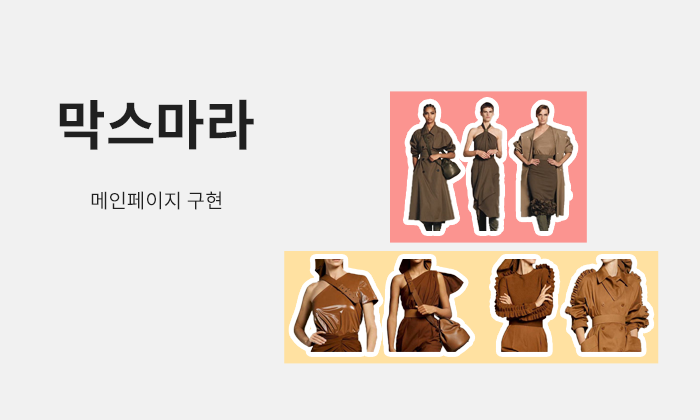
<style>
.page{position:relative;width:700px;height:420px;background:#f1f1f1}
.page>*{position:absolute;margin:0}
.t1{font:54px "NotoSansKR-Bold";color:#202020}
.t2{font:20px "NotoSansKR-Regular";color:#202020}
</style>
<div class="page">
<p class="t1" style="left:59px;top:99px;width:195px;height:51px">막스마라</p>
<p class="t2" style="left:91px;top:191px;width:131px;height:19px">메인페이지 구현</p>
</div>
